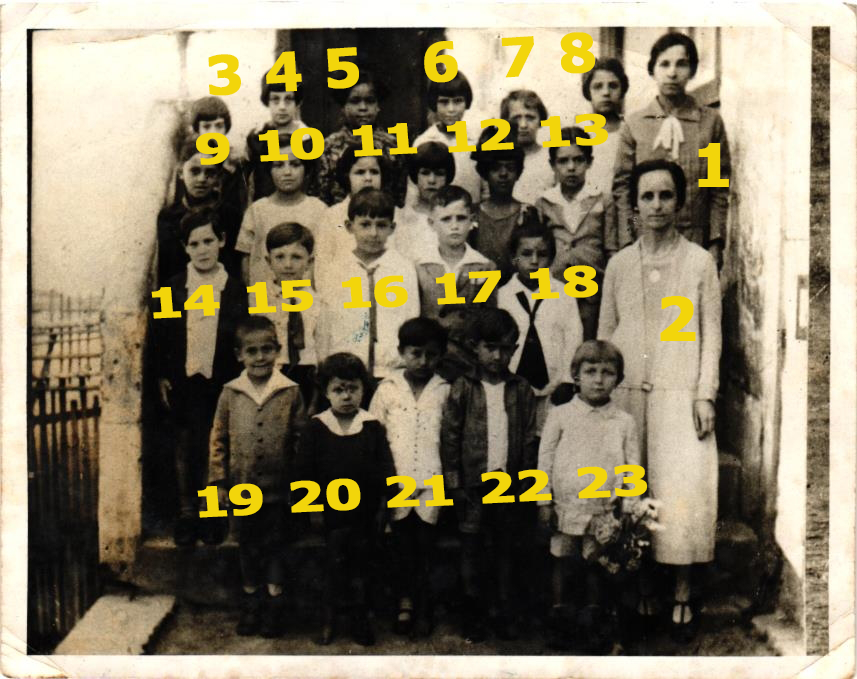
<style>
.page{position:relative;width:857px;height:679px}
.page>*{position:absolute;margin:0}
.t1{font:91.4px "Verdana-Bold";color:#f2d50b;font-weight:bold}
.t2{font:70.4px "Verdana-Bold";color:#f2d50b;font-weight:bold;scale:1.3 1}
.t3{font:102px "Verdana-Bold";color:#f2d50b;font-weight:bold}
</style>
<div class="page">
<p class="t1" style="left:208px;top:32px;width:387px;height:64px;rotate:-4deg">3 4 5   6  7 8</p>
<p class="t2" style="left:196px;top:113px;width:412px;height:52px;rotate:-3deg">9 10 11 12 13</p>
<p class="t3" style="left:698px;top:143px;width:31px;height:44px">1</p>
<p class="t2" style="left:151px;top:265px;width:447px;height:54px;rotate:-3deg">14 15 16 17 18</p>
<p class="t3" style="left:660px;top:296px;width:36px;height:45px">2</p>
<p class="t2" style="left:197px;top:464px;width:450px;height:54px;rotate:-3deg">19 20 21 22 23</p>
</div>
